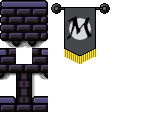
<style>
.page{position:relative;width:144px;height:128px;background:#ffffff}
.page>*{position:absolute;margin:0}
.t1{font:30px "VinerHandITC";color:#000000}
</style>
<div class="page">
<p class="t1" style="left:66px;top:16px;width:26px;height:24px">M</p>
</div>
